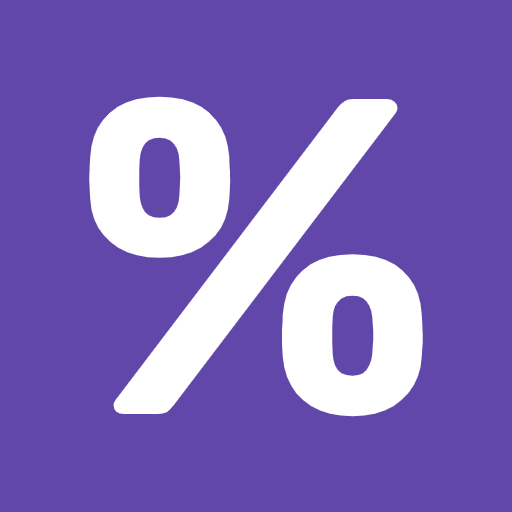
<style>
.page{position:relative;width:512px;height:512px;background:#6247aa}
.page>*{position:absolute;margin:0}
.t1{font:450px "Rubik-Bold";color:#ffffff}
</style>
<div class="page">
<p class="t1" style="left:89px;top:96px;width:334px;height:321px">%</p>
</div>
